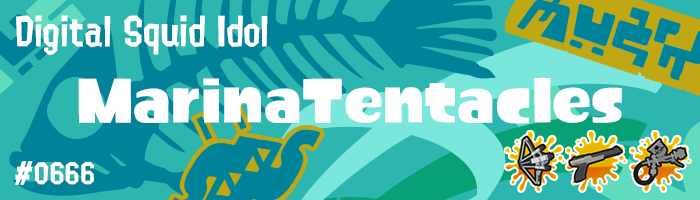
<style>
.page{position:relative;width:700px;height:200px;background:#2db5b0}
.page>*{position:absolute;margin:0}
.t1{font:37.3px "Splatoon2";color:#ffffff}
.t2{font:58.7px "Splatoon1";color:#ffffff}
.t3{font:26.7px "Splatoon2";color:#ffffff}
</style>
<div class="page">
<p class="t1" style="left:16px;top:15px;width:252px;height:40px">Digital Squid Idol</p>
<p class="t2" style="left:78px;top:77px;width:544px;height:47px">MarinaTentacles</p>
<p class="t3" style="left:15px;top:161px;width:79px;height:24px">#0666</p>
</div>
